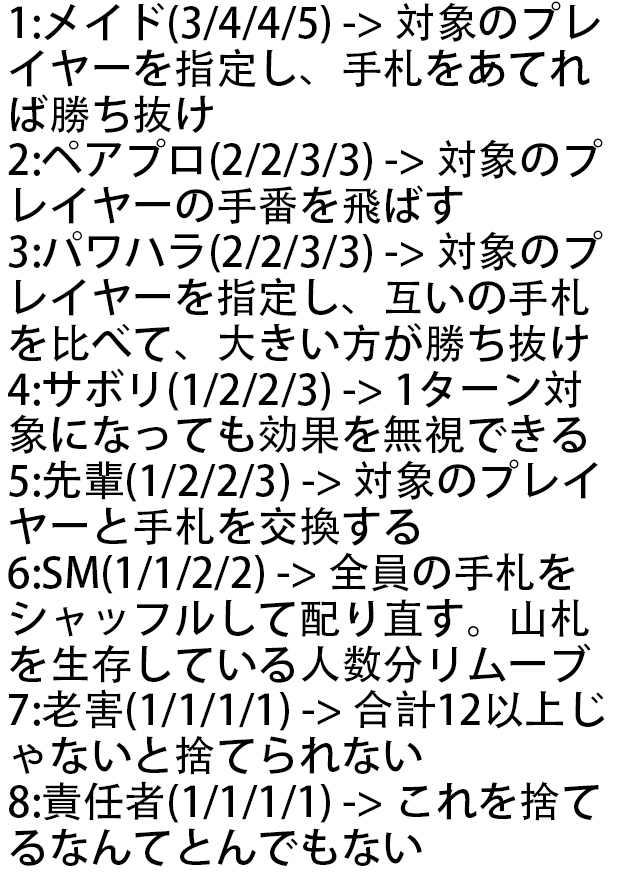
<style>
.page{position:relative;width:625px;height:875px;background:#ffffff}
.page>*{position:absolute;margin:0}
.t1{font:41.7px/45.8px "AdobeHeitiStd-Regular";color:#000000}
</style>
<div class="page">
<p class="t1" style="left:8px;top:1px;width:597px;height:865px">1:メイド(3/4/4/5) -&gt; 対象のプレイヤーを指定し、手札をあてれば勝ち抜け<br>2:ペアプロ(2/2/3/3) -&gt; 対象のプレイヤーの手番を飛ばす<br>3:パワハラ(2/2/3/3) -&gt; 対象のプレイヤーを指定し、互いの手札を比べて、大きい方が勝ち抜け<br>4:サボリ(1/2/2/3) -&gt; 1ターン対象になっても効果を無視できる<br>5:先輩(1/2/2/3) -&gt; 対象のプレイヤーと手札を交換する<br>6:SM(1/1/2/2) -&gt; 全員の手札をシャッフルして配り直す。山札を生存している人数分リムーブ<br>7:老害(1/1/1/1) -&gt; 合計12以上じゃないと捨てられない<br>8:責任者(1/1/1/1) -&gt; これを捨てるなんてとんでもない</p>
</div>
